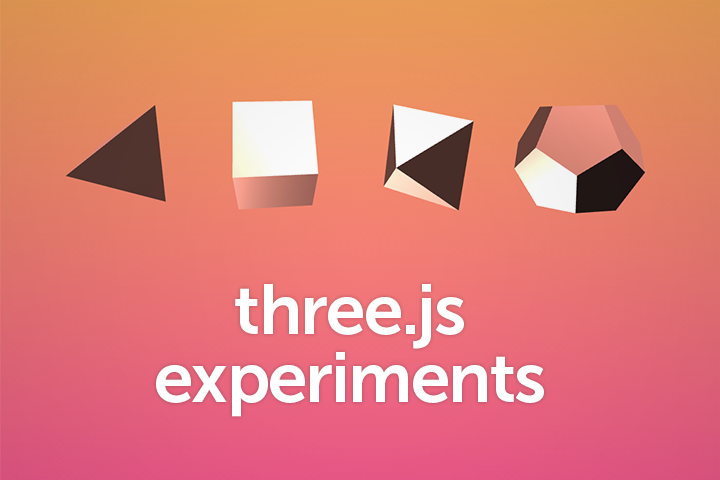
<style>
.page{position:relative;width:720px;height:480px}
.page>*{position:absolute;margin:0}
.t1{font:70.5px/67.5px "MuseoSans-700";letter-spacing:-0.025em;color:#ffffff}
</style>
<div class="page">
<p class="t1" style="left:156px;top:284px;width:388px;height:133px;text-align:center">three.js<br>experiments</p>
</div>
